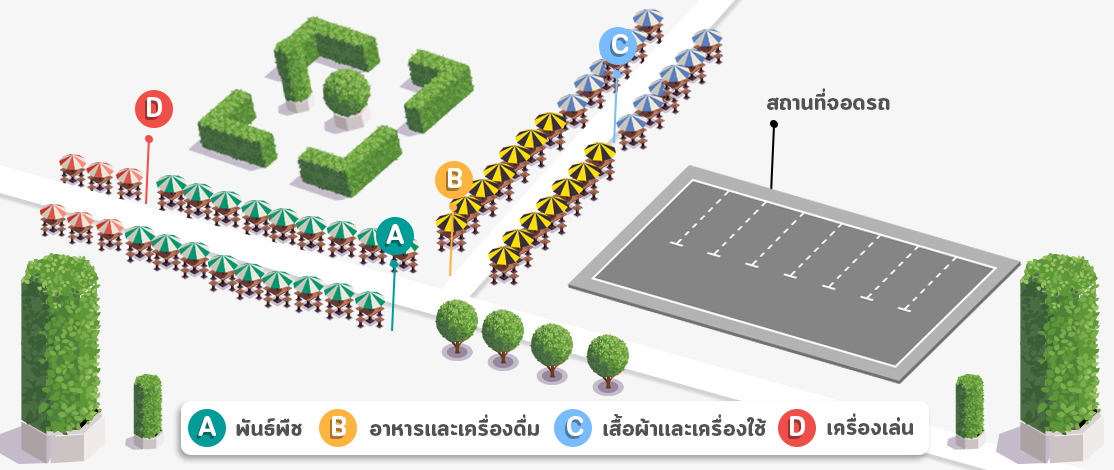
<style>
.page{position:relative;width:1114px;height:470px;background:#f6f6f6}
.page>*{position:absolute;margin:0}
.t1{font:27.5px "CloudSoft-Bold";color:#ffffff}
.t2{font:24px "CloudSoft-Bold";color:#525252}
</style>
<div class="page">
<p class="t1" style="left:612px;top:34px;width:17px;height:20px">C</p>
<p class="t2" style="left:767px;top:88px;width:123px;height:22px">สถานที่จอดรถ</p>
<p class="t1" style="left:147px;top:97px;width:15px;height:20px">D</p>
<p class="t1" style="left:448px;top:168px;width:14px;height:20px">B</p>
<p class="t1" style="left:386px;top:224px;width:18px;height:20px">A</p>
<p class="t2" style="left:370px;top:414px;width:169px;height:22px">อาหารเเละเครื่องดื่ม</p>
<p class="t2" style="left:603px;top:414px;width:164px;height:22px">เสื้อผ้าเเละเครื่องใช้</p>
<p class="t2" style="left:827px;top:413px;width:87px;height:22px">เครื่องเล่น</p>
<p class="t1" style="left:198px;top:416px;width:18px;height:20px">A</p>
<p class="t2" style="left:236px;top:418px;width:66px;height:18px">พันธ์พืช</p>
<p class="t1" style="left:332px;top:416px;width:14px;height:20px">B</p>
<p class="t1" style="left:567px;top:416px;width:17px;height:20px">C</p>
<p class="t1" style="left:790px;top:416px;width:15px;height:20px">D</p>
</div>
